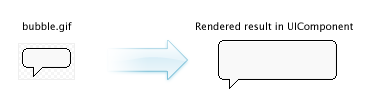
<style>
.page{position:relative;width:370px;height:102px;background:#ffffff}
.page>*{position:absolute;margin:0}
.t1{font:10px "LucidaGrande";color:#000000}
</style>
<div class="page">
<p class="t1" style="left:23px;top:22px;width:49px;height:10px">bubble.gif</p>
<p class="t1" style="left:196px;top:22px;width:157px;height:10px">Rendered result in UIComponent</p>
</div>
